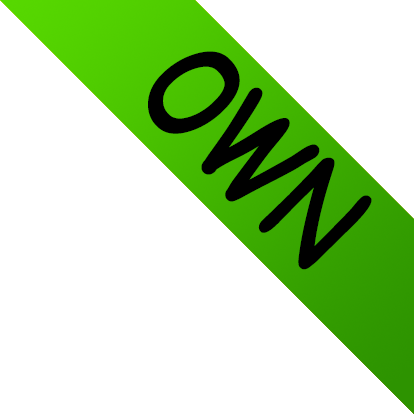
<style>
.page{position:relative;width:414px;height:414px;background:#ffffff}
.page>*{position:absolute;margin:0}
.t1{font:128.5px "ComicSansMS-Bold";color:#000000;scale:0.73 1}
</style>
<div class="page">
<p class="t1" style="left:148px;top:51px;width:224px;height:219px;rotate:45deg">OWN</p>
</div>
